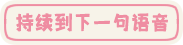
<style>
.page{position:relative;width:183px;height:45px;background:#f7f3e9}
.page>*{position:absolute;margin:0}
.t1{font:12px "shetumodengxiaofangti";color:#ef8da2;font-weight:bold;scale:0.94 1}
</style>
<div class="page">
<p class="t1" style="left:16px;top:13px;width:152px;height:19px">持续到下一句语音</p>
</div>
